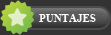
<style>
.page{position:relative;width:111px;height:35px;background:#333333}
.page>*{position:absolute;margin:0}
.t1{font:11px "TimesNewRomanPS-BoldMT";color:#fefbfb}
</style>
<div class="page">
<p class="t1" style="left:39px;top:14px;width:57px;height:8px">PUNTAJES</p>
</div>
